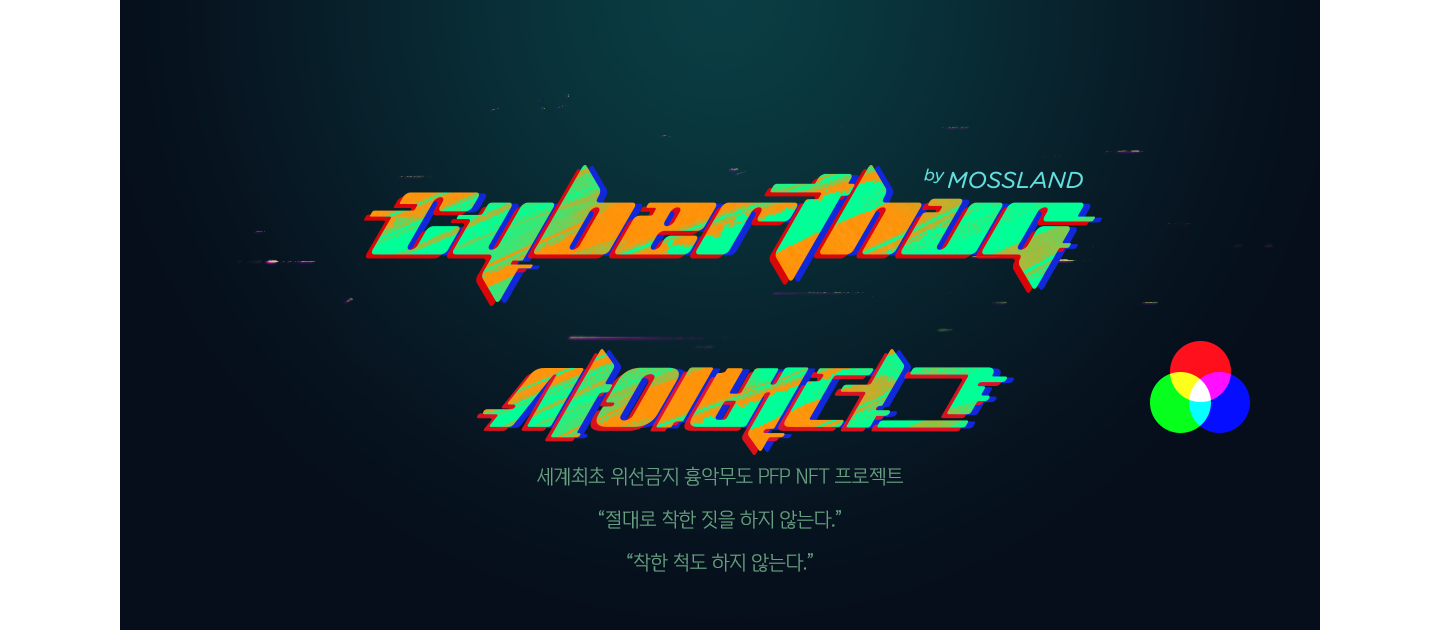
<style>
.page{position:relative;width:1440px;height:630px}
.page>*{position:absolute;margin:0}
.t1{font:20px/43px "VITRO-PRIDE-TTF";color:#67a083}
</style>
<div class="page">
<p class="t1" style="left:537px;top:466px;width:366px;height:106px;text-align:center">세계최초 위선금지 흉악무도 PFP NFT 프로젝트<br>“절대로 착한 짓을 하지 않는다.”<br>“착한 척도 하지 않는다.”</p>
</div>
